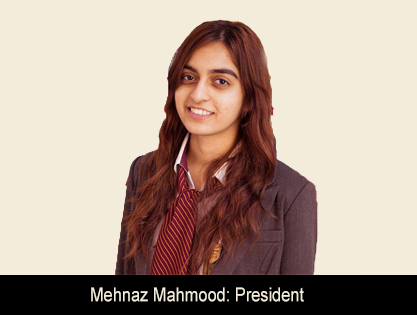
<style>
.page{position:relative;width:417px;height:315px;background:#f3ecda}
.page>*{position:absolute;margin:0}
.t1{font:19.2px "ArialMT";color:#f3ecda;scale:0.86 1}
</style>
<div class="page">
<p class="t1" style="left:91px;top:287px;width:213px;height:15px">Mehnaz Mahmood: President</p>
</div>
